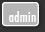
<style>
.page{position:relative;width:45px;height:32px;background:#b5b5b5}
.page>*{position:absolute;margin:0}
.t1{font:13px "Futura-CondensedMedium";letter-spacing:0.025em;color:#ffffff}
</style>
<div class="page">
<p class="t1" style="left:9px;top:11px;width:27px;height:11px">admin</p>
</div>
